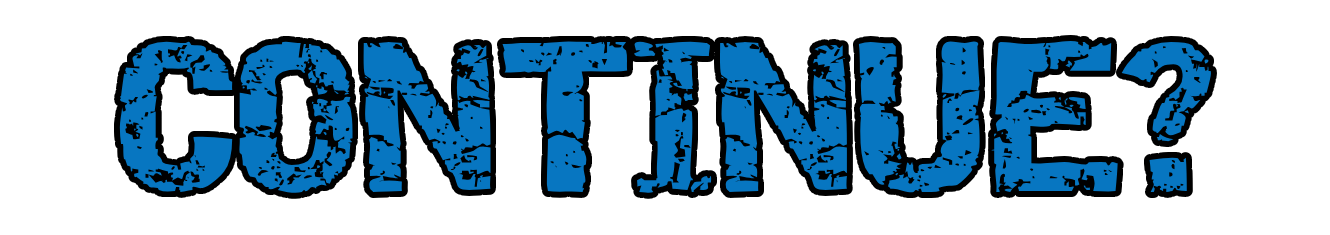
<style>
.page{position:relative;width:1330px;height:235px;background:#ffffff}
.page>*{position:absolute;margin:0}
.t1{font:150px "Destroy";color:#0776c1}
</style>
<div class="page">
<p class="t1" style="left:119px;top:40px;width:1092px;height:153px">CONTINUE?</p>
</div>
